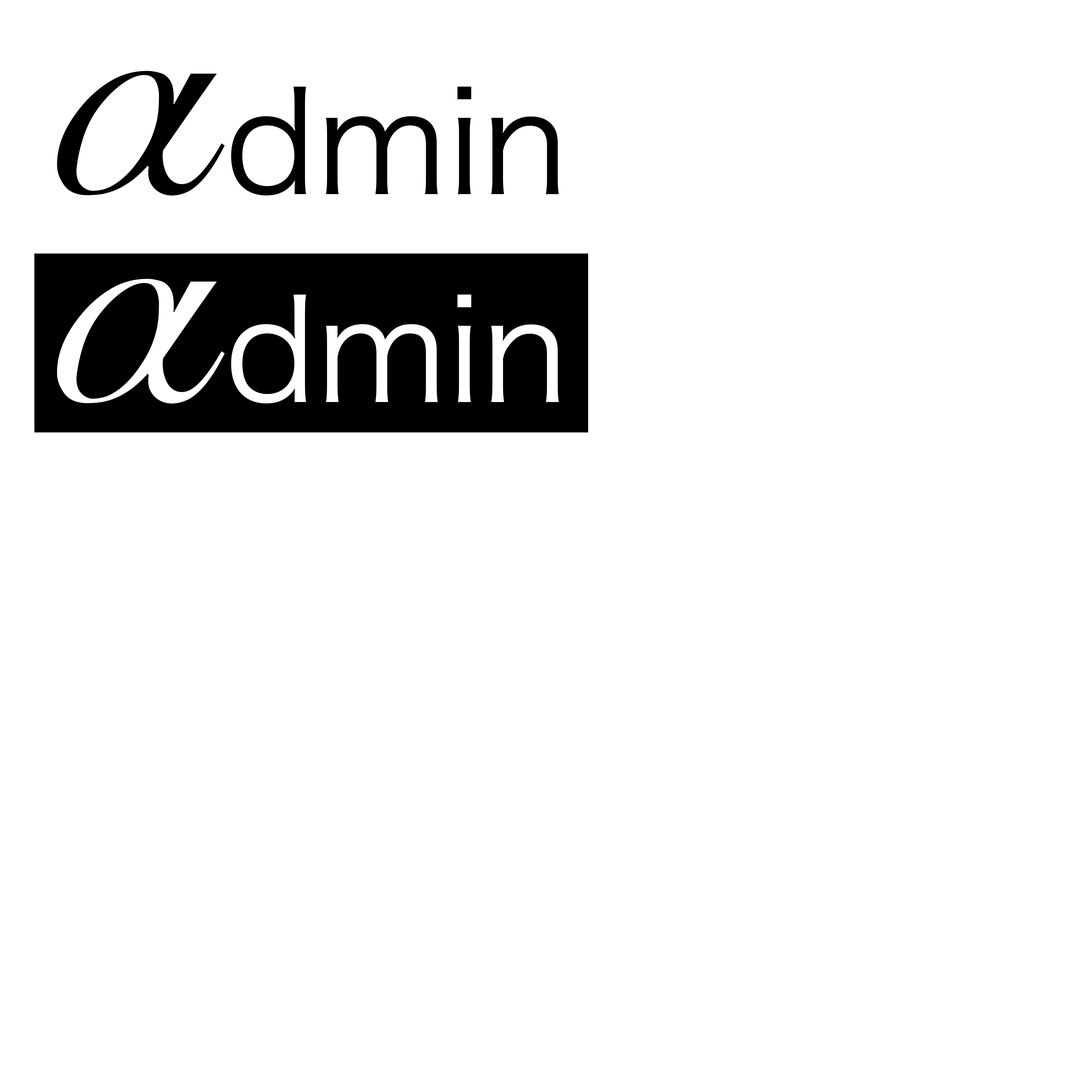
<style>
.page{position:relative;width:1092px;height:1092px;background:#ffffff}
.page>*{position:absolute;margin:0}
.t1{font:345.5px "SnellRoundhand";color:#000000}
.t2{font:141.4px "HiraginoSansGB-W3";color:#000000}
.t3{font:345.5px "SnellRoundhand";color:#ffffff}
.t4{font:141.4px "HiraginoSansGB-W3";color:#ffffff}
</style>
<div class="page">
<p class="t1" style="left:57px;top:71px;width:168px;height:125px">ɑ</p>
<p class="t2" style="left:231px;top:86px;width:328px;height:109px">dmin</p>
<p class="t3" style="left:57px;top:279px;width:168px;height:125px">ɑ</p>
<p class="t4" style="left:231px;top:294px;width:328px;height:109px">dmin</p>
</div>
